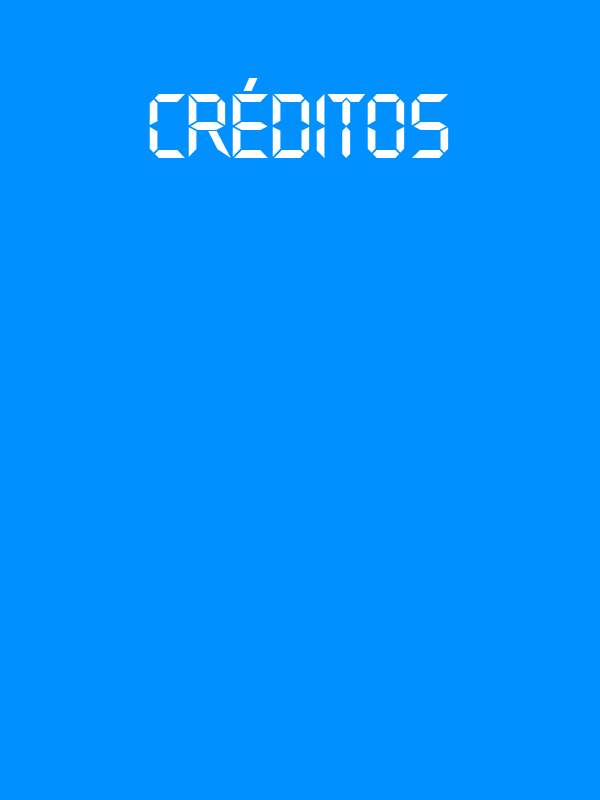
<style>
.page{position:relative;width:600px;height:800px;background:#0090ff}
.page>*{position:absolute;margin:0}
.t1{font:88.7px "Digiface";color:#ffffff}
</style>
<div class="page">
<p class="t1" style="left:149px;top:78px;width:300px;height:80px">CRÉDITOS</p>
</div>
